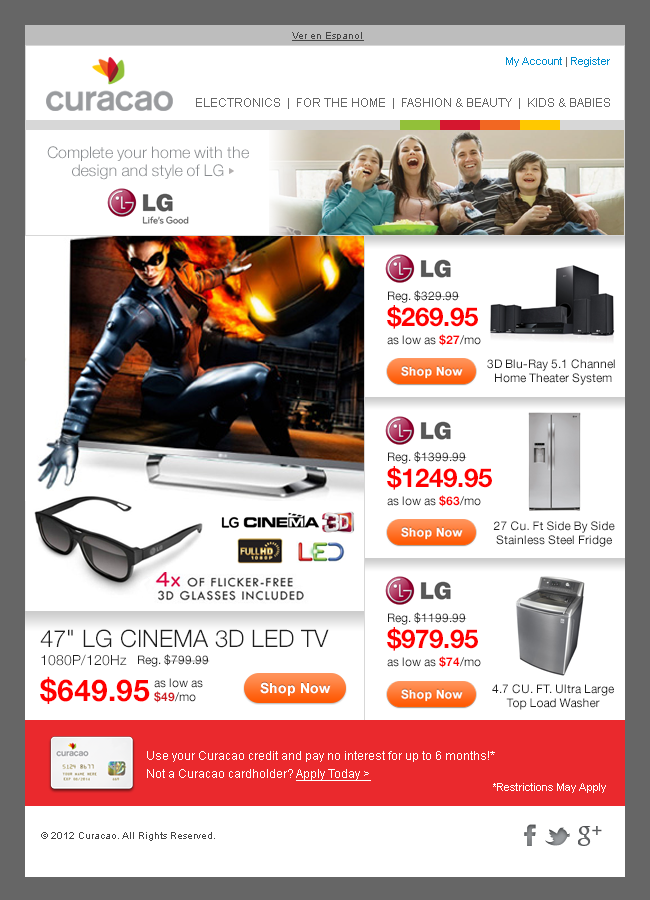
<style>
.page{position:relative;width:650px;height:900px;background:#ffffff}
.page>*{position:absolute;margin:0}
.t1{font:10px "ArialMT";color:#444444;text-decoration:underline}
.t2{font:11px "ArialMT";color:#008ecf}
.t3{font:11px "ArialMT";color:#666666}
.t4{font:12px "ArialMT";color:#666666}
.t5{font:16px/18px "HelveticaNeue-Light";color:#878a8e}
.t6{font:12px/18px "HelveticaNeue-Roman";color:#1e1e1e}
.t7{font:26px/26px "HelveticaNeue-Bold";color:#ff0000}
.t8{font:12px/18px "HelveticaNeue-Bold";color:#ff0000}
.t9{font:12px/14px "HelveticaNeue-Roman";color:#1e1e1e}
.t10{font:24px/18px "HelveticaNeue-Light";color:#1e1e1e}
.t11{font:14px/18px "HelveticaNeue-Light";color:#1e1e1e}
.t12{font:30px/36px "HelveticaNeue-Bold";color:#ff0000}
.t13{font:12px "HelveticaNeue-Roman";color:#1e1e1e}
.t14{font:12px/14px "HelveticaNeue-Roman";color:#ce181e}
.t15{font:12px/14px "HelveticaNeue-Bold";color:#ce181e}
.t16{font:12px/18px "ArialMT";color:#ffffff}
.t17{font:12px/18px "ArialMT";color:#ffffff;text-decoration:underline}
.t18{font:11px "ArialMT";color:#ffffff}
.t19{font:10px "ArialMT";color:#444444}
</style>
<div class="page">
<p class="t1" style="left:292px;top:32px;width:72px;height:9px">Ver en Espanol</p>
<p class="t2" style="left:506px;top:57px;width:104px;height:10px">My Account<span class="t3"> | </span>Register</p>
<p class="t4" style="left:196px;top:98px;width:414px;height:11px">ELECTRONICS  |  FOR THE HOME  |  FASHION &amp; BEAUTY  |  KIDS &amp; BABIES</p>
<p class="t5" style="left:47px;top:146px;width:202px;height:34px;text-align:center">Complete your home with the design and style of LG</p>
<p class="t6" style="left:387px;top:290px;width:94px;height:56px">Reg. $329.99<br><span class="t7">$269.95<br></span>as low as <span class="t8">$27</span>/mo</p>
<p class="t9" style="left:487px;top:359px;width:128px;height:26px;text-align:center">3D Blu-Ray 5.1 Channel <br>Home Theater System</p>
<p class="t6" style="left:387px;top:451px;width:105px;height:56px">Reg. $1399.99<br><span class="t7">$1249.95<br></span>as low as <span class="t8">$63</span>/mo</p>
<p class="t9" style="left:493px;top:521px;width:122px;height:26px;text-align:center">27 Cu. Ft Side By Side<br>Stainless Steel Fridge</p>
<p class="t6" style="left:387px;top:612px;width:94px;height:56px">Reg. $1199.99<br><span class="t7">$979.95<br></span>as low as <span class="t8">$74</span>/mo</p>
<p class="t10" style="left:40px;top:629px;width:289px;height:75px">47" LG CINEMA 3D LED TV<br><span class="t11">1080P/120Hz<br></span><span class="t12">$649.95</span></p>
<p class="t13" style="left:138px;top:654px;width:72px;height:13px">Reg. $799.99</p>
<p class="t14" style="left:154px;top:678px;width:49px;height:25px">as low as<br><span class="t15">$49</span>/mo</p>
<p class="t9" style="left:492px;top:684px;width:122px;height:26px;text-align:center">4.7 CU. FT. Ultra Large<br>Top Load Washer</p>
<p class="t16" style="left:147px;top:751px;width:348px;height:30px">Use your Curacao credit and pay no interest for up to 6 months!*<br>Not a Curacao cardholder? <span class="t17">Apply Today &gt;</span></p>
<p class="t18" style="left:493px;top:783px;width:113px;height:10px">*Restrictions May Apply</p>
<p class="t19" style="left:41px;top:832px;width:174px;height:9px">© 2012 Curacao. All Rights Reserved.</p>
</div>
